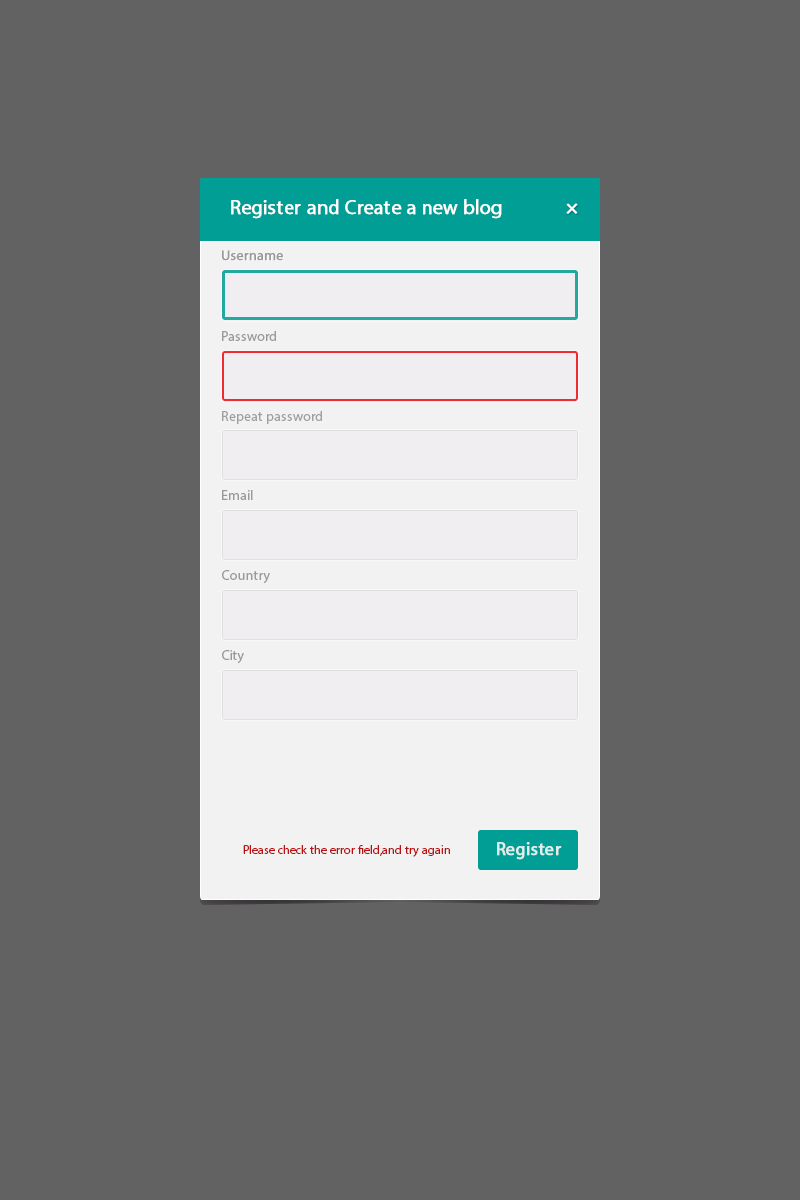
<style>
.page{position:relative;width:800px;height:1200px;background:#626262}
.page>*{position:absolute;margin:0}
.t1{font:20px "MyriadPro-Regular";color:#ffffff;font-weight:bold}
.t2{font:24px "MyriadPro-Regular";color:#ffffff;font-weight:bold}
.t3{font:14px "MyriadPro-Regular";color:#999999;font-weight:bold}
.t4{font:14px "MyriadPro-Regular";color:#999999}
.t5{font:14px "MyriadPro-Regular";color:#9f9f9f}
.t6{font:12px "MyriadPro-Regular";color:#b71212}
.t7{font:18px "MyriadPro-Regular";color:#ddeeec;font-weight:bold}
</style>
<div class="page">
<p class="t1" style="left:231px;top:199px;width:271px;height:20px">Register and Create a new blog</p>
<p class="t2" style="left:566px;top:203px;width:12px;height:11px;rotate:45deg">+</p>
<p class="t3" style="left:222px;top:250px;width:61px;height:11px">Username</p>
<p class="t4" style="left:222px;top:331px;width:54px;height:10px">Password</p>
<p class="t5" style="left:222px;top:411px;width:100px;height:13px">Repeat password</p>
<p class="t4" style="left:222px;top:490px;width:31px;height:10px">Email</p>
<p class="t4" style="left:222px;top:570px;width:48px;height:14px">Country</p>
<p class="t4" style="left:222px;top:650px;width:22px;height:14px">City</p>
<p class="t6" style="left:243px;top:845px;width:207px;height:12px">Please check the error field,and try again</p>
<p class="t7" style="left:497px;top:842px;width:65px;height:18px">Register</p>
</div>
